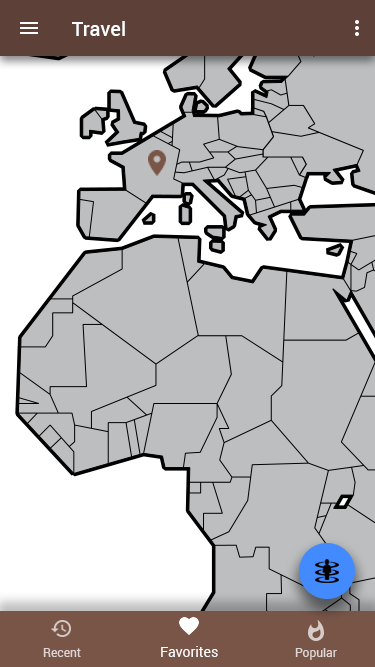
<style>
.page{position:relative;width:375px;height:667px;background:#bcbec0}
.page>*{position:absolute;margin:0}
.t1{font:20px "Roboto-Medium";color:#ffffff}
.t2{font:12px "Roboto-Regular";color:#ddd6d4}
.t3{font:14px "Roboto-Regular";color:#ffffff}
</style>
<div class="page">
<p class="t1" style="left:72px;top:21px;width:53px;height:15px">Travel</p>
<p class="t2" style="left:43px;top:648px;width:38px;height:9px">Recent</p>
<p class="t3" style="left:161px;top:646px;width:57px;height:11px">Favorites</p>
<p class="t2" style="left:295px;top:648px;width:42px;height:12px">Popular</p>
</div>
